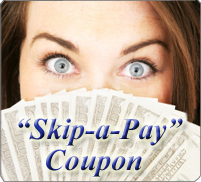
<style>
.page{position:relative;width:201px;height:182px}
.page>*{position:absolute;margin:0}
.t1{font:30px "TimesNewRomanPS-BoldItalicMT"}
</style>
<div class="page">
<p class="t1" style="left:18px;top:118px;width:165px;height:28px">“Skip-a-Pay”</p>
<p class="t1" style="left:46px;top:149px;width:96px;height:28px">Coupon</p>
</div>
